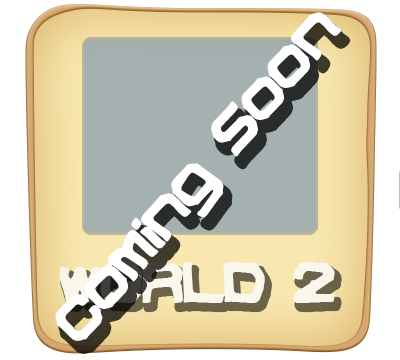
<style>
.page{position:relative;width:400px;height:360px;background:#ffffff}
.page>*{position:absolute;margin:0}
.t1{font:60px "VindictiveBRK";letter-spacing:-0.02em;color:#ffffff}
.t2{font:60px "VindictiveBRK";letter-spacing:-0.02em;color:#fbfbfc}
</style>
<div class="page">
<p class="t1" style="left:55px;top:12px;width:287px;height:329px;rotate:-50deg">Coming Soon</p>
<p class="t2" style="left:59px;top:262px;width:276px;height:41px;opacity:0.4">wORLD 2</p>
<p class="t2" style="left:59px;top:262px;width:276px;height:41px;opacity:0.4">wORLD 2</p>
<p class="t2" style="left:59px;top:262px;width:276px;height:41px;opacity:0.4">wORLD 2</p>
</div>
